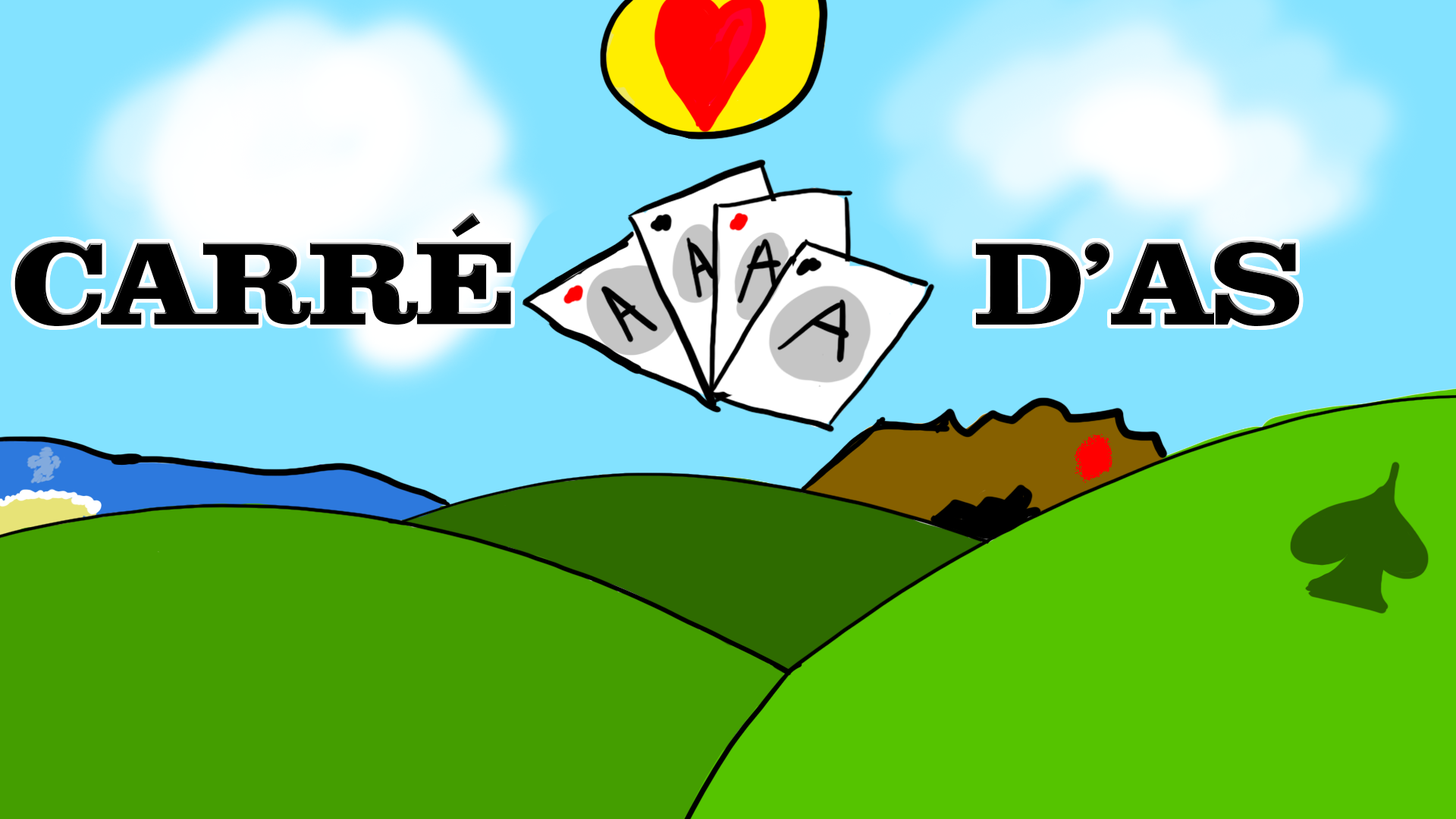
<style>
.page{position:relative;width:1456px;height:819px;background:#83e2ff}
.page>*{position:absolute;margin:0}
.t1{font:113.7px "Clarendon";color:#000000}
</style>
<div class="page">
<p class="t1" style="left:14px;top:212px;width:1286px;height:114px">CARRÉ              D’AS</p>
</div>
